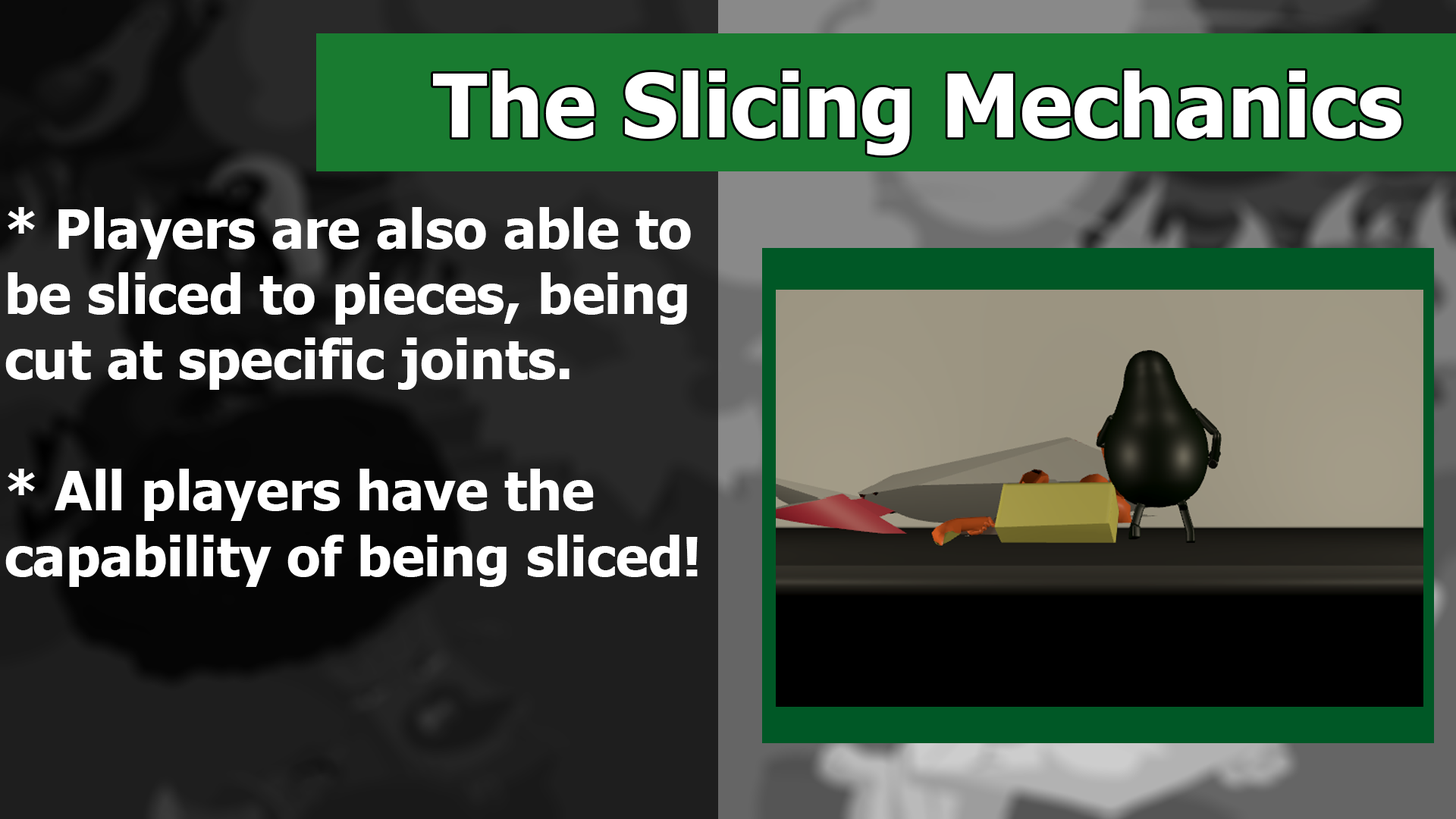
<style>
.page{position:relative;width:1456px;height:819px}
.page>*{position:absolute;margin:0}
.t1{font:88.1px "Tahoma-Bold";color:#ffffff}
.t2{font:54.6px "Tahoma-Bold";color:#ffffff}
</style>
<div class="page">
<p class="t1" style="left:433px;top:71px;width:968px;height:84px">The Slicing Mechanics</p>
<p class="t2" style="left:5px;top:207px;width:693px;height:380px">* Players are also able to<br>be sliced to pieces, being<br>cut at specific joints.<br><br>* All players have the<br>capability of being sliced!</p>
</div>
